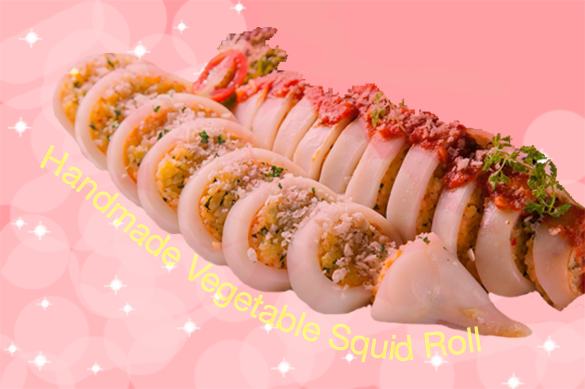
<style>
.page{position:relative;width:585px;height:389px}
.page>*{position:absolute;margin:0}
.t1{font:34.7px "HelveticaNeue";color:#fff67f}
</style>
<div class="page">
<p class="t1" style="left:40px;top:144px;width:442px;height:219px">Handmade Vegetable Squid Roll</p>
</div>
